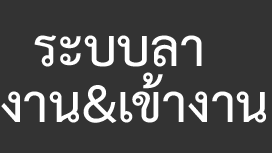
<style>
.page{position:relative;width:272px;height:153px;background:#333333}
.page>*{position:absolute;margin:0}
.t1{font:75px/14px "THSarabunPSK-Bold";color:#ffffff;text-transform:uppercase}
</style>
<div class="page">
<p class="t1" style="left:1px;top:35px;width:265px;height:88px">ระบบลา<br><br><br>   <br>งาน&amp;เข้างาน</p>
</div>
